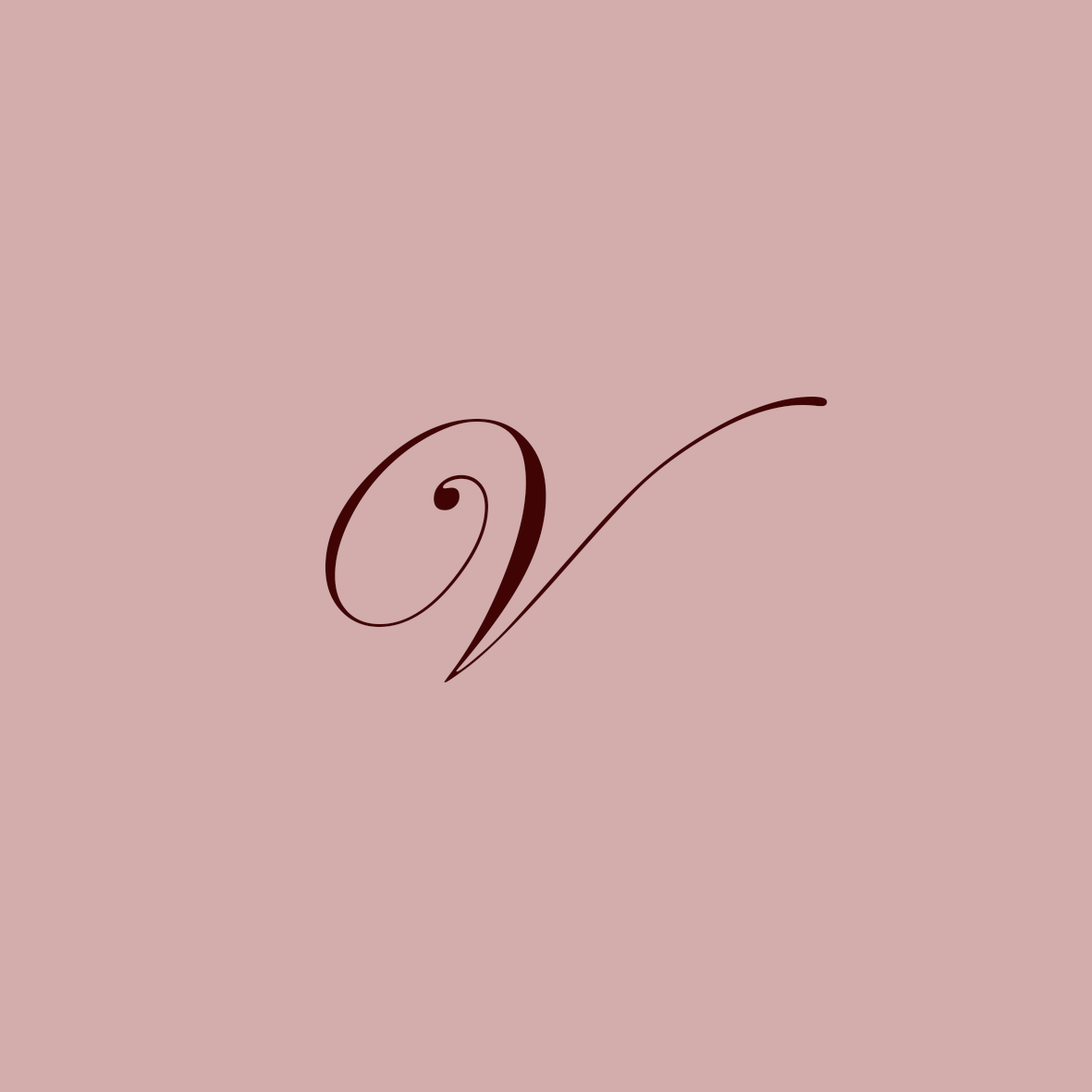
<style>
.page{position:relative;width:1092px;height:1092px;background:#d3acac}
.page>*{position:absolute;margin:0}
.t1{font:369.9px "EdwardianScriptITC";color:#410404}
</style>
<div class="page">
<p class="t1" style="left:325px;top:397px;width:503px;height:285px">V</p>
</div>
